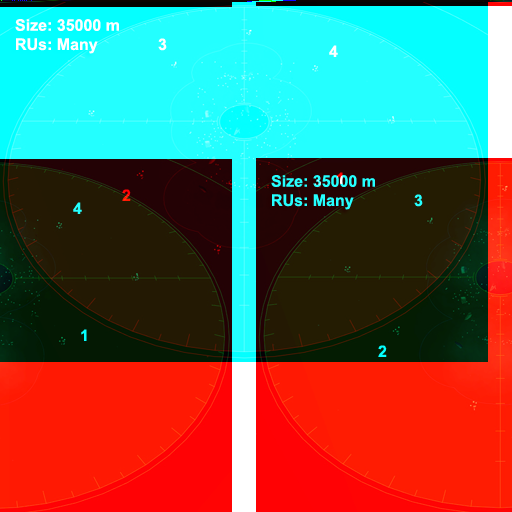
<style>
.page{position:relative;width:512px;height:512px}
.page>*{position:absolute;margin:0}
.t1{font:16px "Arial-BoldMT"}
</style>
<div class="page">
<p class="t1" style="left:15px;top:17px;width:104px;height:35px">Size: 35000 m<br>RUs: Many</p>
<p class="t1" style="left:329px;top:43px;width:9px;height:12px">4</p>
<p class="t1" style="left:337px;top:170px;width:6px;height:12px">1</p>
</div>
